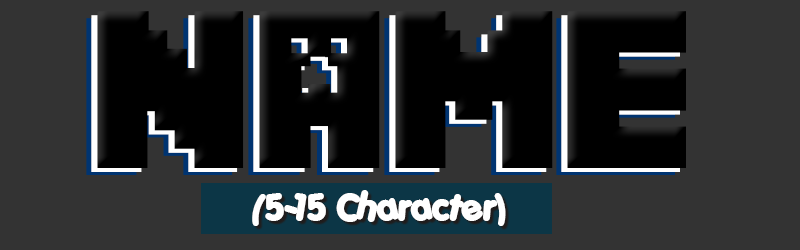
<style>
.page{position:relative;width:800px;height:250px;background:#333333}
.page>*{position:absolute;margin:0}
.t1{font:200px "Minecrafter";color:#000000}
.t2{font:36px "Porkys";color:#ffffff}
</style>
<div class="page">
<p class="t1" style="left:97px;top:11px;width:589px;height:157px">Name</p>
<p class="t2" style="left:252px;top:190px;width:254px;height:36px">(5-15 Character)</p>
</div>
